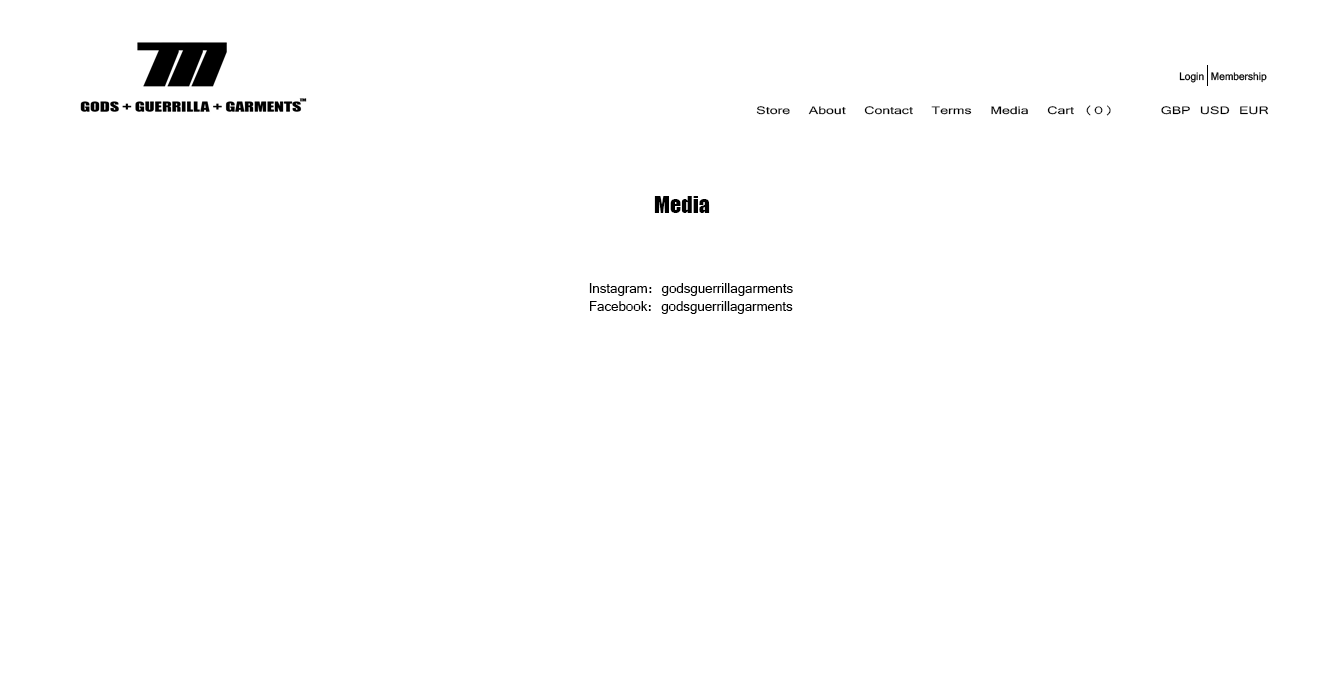
<style>
.page{position:relative;width:1332px;height:683px;background:#ffffff}
.page>*{position:absolute;margin:0}
.t1{font:11.7px "Vrinda";color:#000000;scale:1.35 1}
.t2{font:22.2px "Impact";color:#000000}
.t3{font:14.8px "Vrinda";color:#000000}
</style>
<div class="page">
<p class="t1" style="left:756px;top:105px;width:513px;height:11px">Store  About  Contact  Terms  Media  Cart (0)     GBP USD EUR</p>
<p class="t2" style="left:654px;top:196px;width:56px;height:17px">Media</p>
<p class="t3" style="left:589px;top:283px;width:204px;height:31px;text-align:center">Instagram: godsguerrillagarments<br>  Facebook: godsguerrillagarments</p>
</div>
